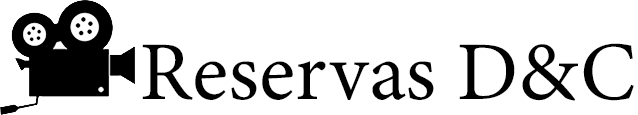
<style>
.page{position:relative;width:638px;height:115px;background:#ffffff}
.page>*{position:absolute;margin:0}
.t1{font:83.3px "MinionVariableConcept-Roman";color:#000000}
</style>
<div class="page">
<p class="t1" style="left:142px;top:43px;width:492px;height:58px">Reservas D&amp;C</p>
</div>
